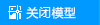
<style>
.page{position:relative;width:100px;height:25px;background:#0099ff}
.page>*{position:absolute;margin:0}
.t1{font:12px "MicrosoftYaHei";letter-spacing:0.05em;color:#ffffff}
</style>
<div class="page">
<p class="t1" style="left:26px;top:6px;width:50px;height:13px">关闭模型</p>
</div>
